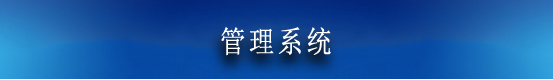
<style>
.page{position:relative;width:553px;height:80px}
.page>*{position:absolute;margin:0}
.t1{font:30px "SimSun";letter-spacing:0.1em;color:#ffffff;font-weight:bold;scale:0.85 1}
</style>
<div class="page">
<p class="t1" style="left:221px;top:27px;width:110px;height:29px">管理系统</p>
</div>
